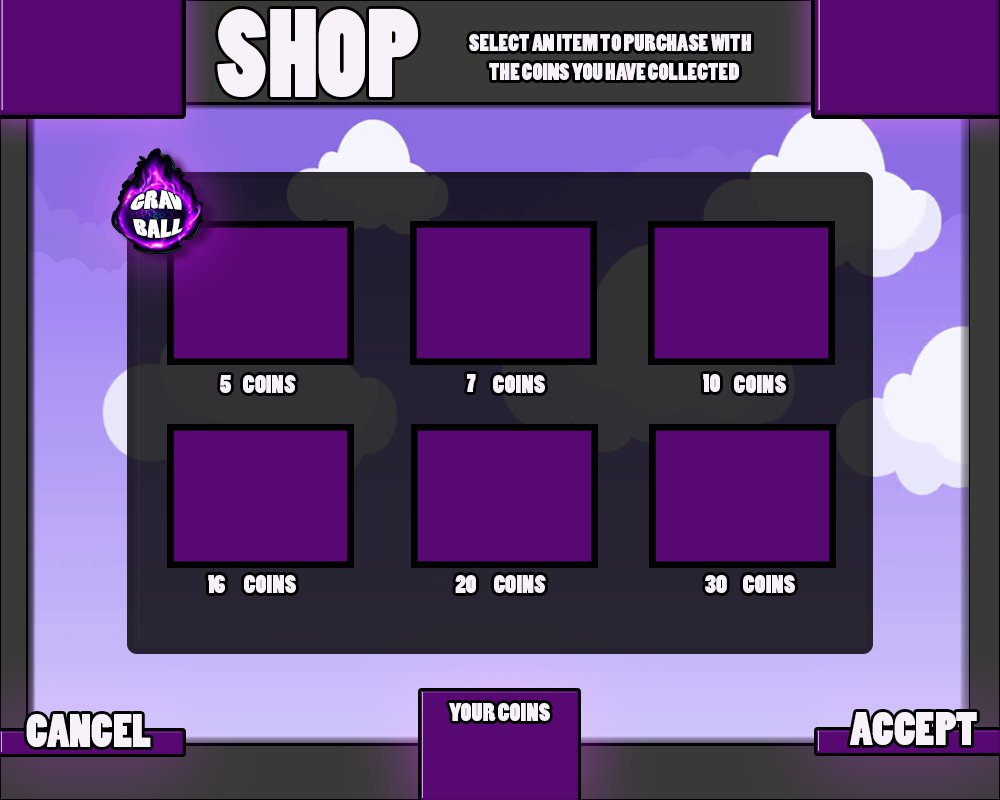
<style>
.page{position:relative;width:1000px;height:800px;background:#570872}
.page>*{position:absolute;margin:0}
.t1{font:117.7px "PoplarStd";color:#f7f1f9;scale:0.94 1}
.t2{font:22px "PoplarStd";color:#f7f1f9;scale:1.03 1}
.t3{font:17.5px "PoplarStd";color:#fefbff;scale:1.23 1}
.t4{font:24.1px "PoplarStd";color:#f7f1f9;scale:1.03 1}
.t5{font:24px "PoplarStd";color:#f7f1f9;scale:1.03 1}
.t6{font:44.1px "PoplarStd";color:#f7f1f9;scale:1.03 1}
</style>
<div class="page">
<p class="t1" style="left:217px;top:8px;width:201px;height:89px">SHOP</p>
<p class="t2" style="left:469px;top:34px;width:282px;height:17px">SELECT AN ITEM TO PURCHASE WITH</p>
<p class="t2" style="left:489px;top:63px;width:250px;height:17px">THE COINS YOU HAVE COLLECTED</p>
<p class="t3" style="left:130px;top:190px;width:53px;height:49px">GRAV<br>BALL</p>
<p class="t4" style="left:220px;top:375px;width:11px;height:18px">5</p>
<p class="t4" style="left:243px;top:375px;width:53px;height:18px">COINS</p>
<p class="t4" style="left:467px;top:374px;width:9px;height:18px">7</p>
<p class="t4" style="left:493px;top:375px;width:52px;height:18px">COINS</p>
<p class="t4" style="left:703px;top:374px;width:17px;height:18px">10</p>
<p class="t4" style="left:734px;top:375px;width:52px;height:18px">COINS</p>
<p class="t4" style="left:208px;top:575px;width:17px;height:18px">16</p>
<p class="t4" style="left:244px;top:575px;width:52px;height:18px">COINS</p>
<p class="t4" style="left:455px;top:575px;width:21px;height:18px">20</p>
<p class="t4" style="left:494px;top:575px;width:52px;height:18px">COINS</p>
<p class="t4" style="left:705px;top:575px;width:22px;height:18px">30</p>
<p class="t4" style="left:743px;top:575px;width:52px;height:18px">COINS</p>
<p class="t5" style="left:449px;top:703px;width:101px;height:18px">YOUR COINS</p>
<p class="t6" style="left:850px;top:712px;width:127px;height:33px">ACCEPT</p>
<p class="t6" style="left:26px;top:714px;width:125px;height:33px">CANCEL</p>
</div>
